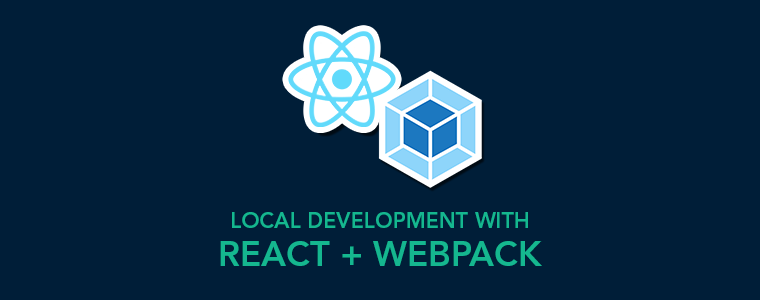
<style>
.page{position:relative;width:760px;height:300px;background:#001e38}
.page>*{position:absolute;margin:0}
.t1{font:21.5px/13.1px "AvenirLTStd-Heavy";color:#15b78f}
.t2{font:34.6px/38.2px "AvenirLTStd-Heavy";color:#15b78f}
</style>
<div class="page">
<p class="t1" style="left:220px;top:212px;width:322px;height:54px;text-align:center">LOCAL DEVELOPMENT WITH<br><span class="t2">REACT + WEBPACK</span></p>
</div>
